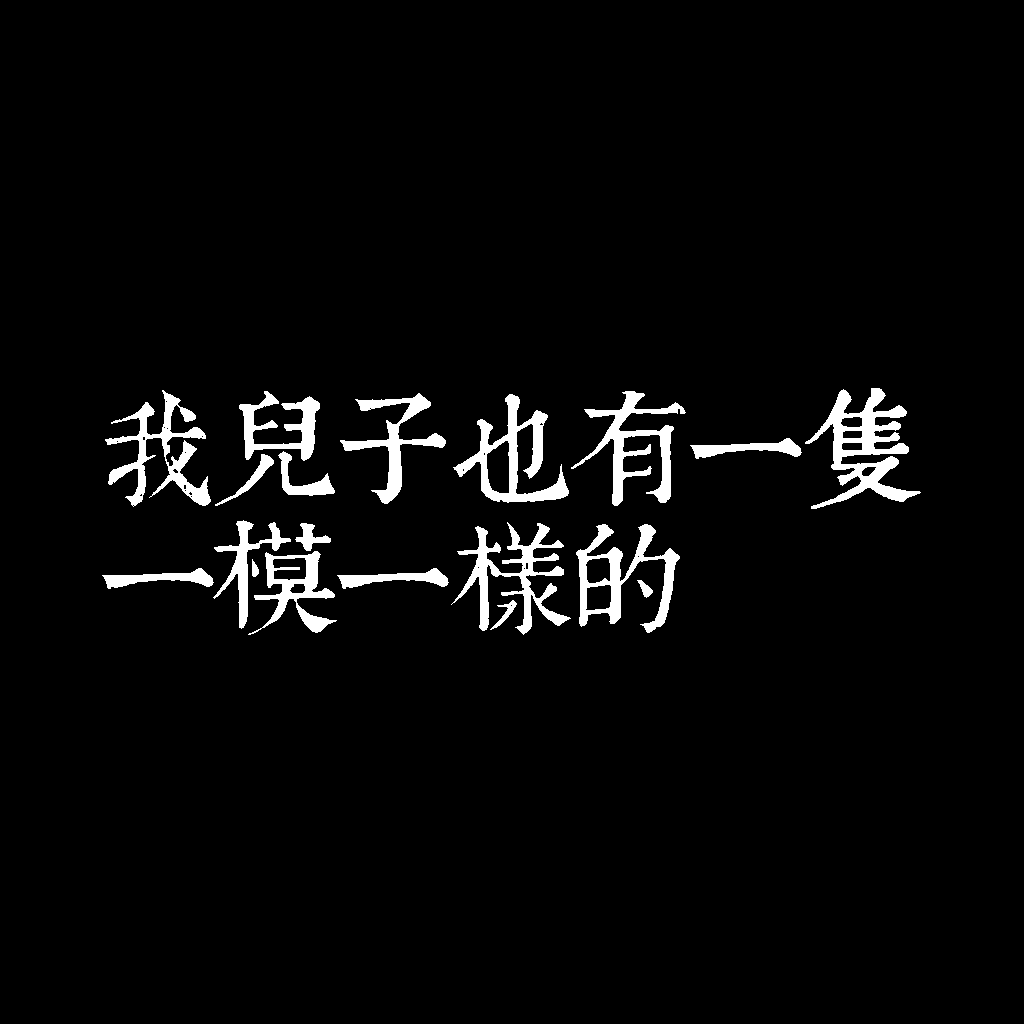
<style>
.page{position:relative;width:1024px;height:1024px;background:#000000}
.page>*{position:absolute;margin:0}
.t1{font:120px/130px "TpldKhangXiDictTrial";letter-spacing:-0.02em;color:#ffffff}
</style>
<div class="page">
<p class="t1" style="left:102px;top:388px;width:819px;height:247px">我兒子也有一隻<br>一模一樣的</p>
</div>
